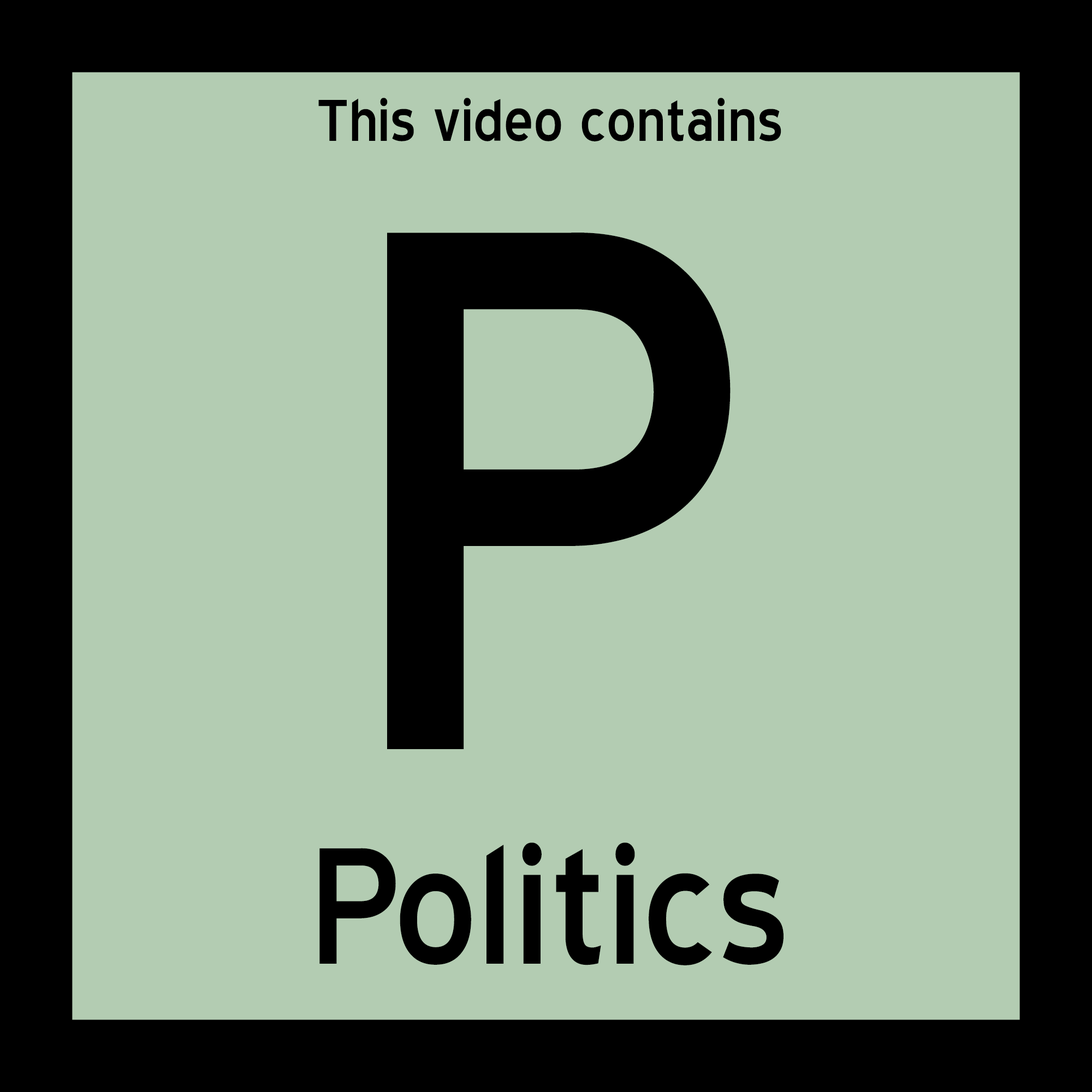
<style>
.page{position:relative;width:1092px;height:1092px;background:#b3ccb2}
.page>*{position:absolute;margin:0}
.t1{font:73.6px "BlueHighway";color:#000000}
.t2{font:931.7px "BlueHighway";color:#000000}
.t3{font:207.9px "BlueHighway";color:#000000}
</style>
<div class="page">
<p class="t1" style="left:318px;top:98px;width:463px;height:43px">This video contains</p>
<p class="t2" style="left:387px;top:233px;width:344px;height:516px">P</p>
<p class="t3" style="left:319px;top:842px;width:464px;height:123px">Politics</p>
</div>
